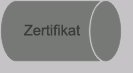
<style>
.page{position:relative;width:133px;height:73px;background:#767976}
.page>*{position:absolute;margin:0}
.t1{font:14.7px "ArialMT";color:#3b3c3b}
</style>
<div class="page">
<p class="t1" style="left:24px;top:24px;width:57px;height:12px">Zertifikat</p>
</div>
